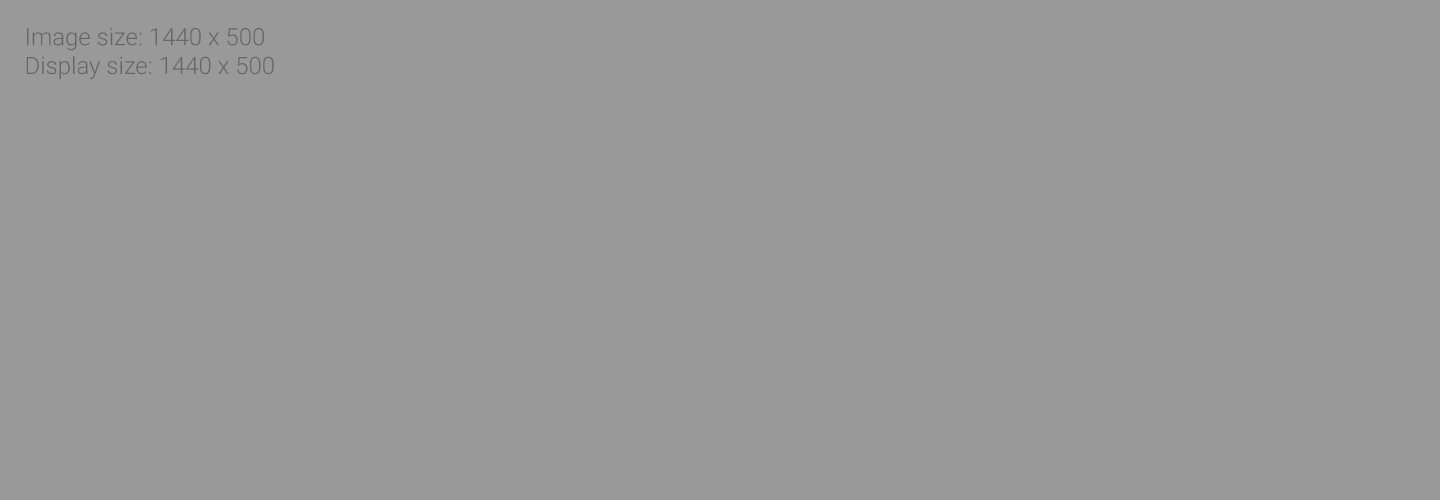
<style>
.page{position:relative;width:1440px;height:500px;background:#999999}
.page>*{position:absolute;margin:0}
.t1{font:24px "Roboto-Light";color:#666666}
</style>
<div class="page">
<p class="t1" style="left:26px;top:28px;width:248px;height:51px">Image size: 1440 x 500<br>Display size: 1440 x 500</p>
</div>
